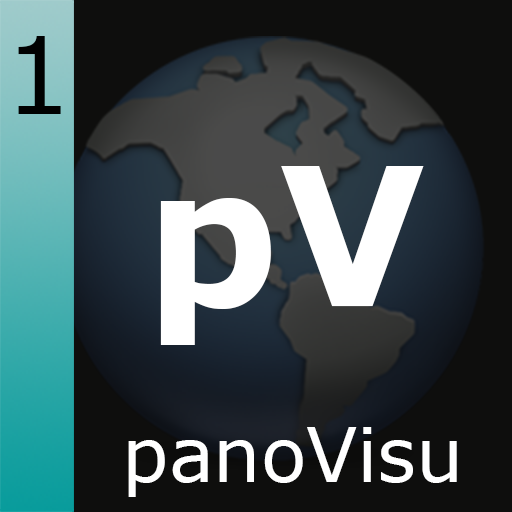
<style>
.page{position:relative;width:512px;height:512px;background:#0e0e0d}
.page>*{position:absolute;margin:0}
.t1{font:106.7px "Verdana";color:#010101}
.t2{font:192px "Verdana-Bold";color:#ffffff}
.t3{font:74.7px "Verdana";color:#ffffff}
</style>
<div class="page">
<p class="t1" style="left:18px;top:36px;width:43px;height:78px">1</p>
<p class="t2" style="left:160px;top:166px;width:264px;height:179px">pV</p>
<p class="t3" style="left:128px;top:427px;width:329px;height:70px">panoVisu</p>
</div>
